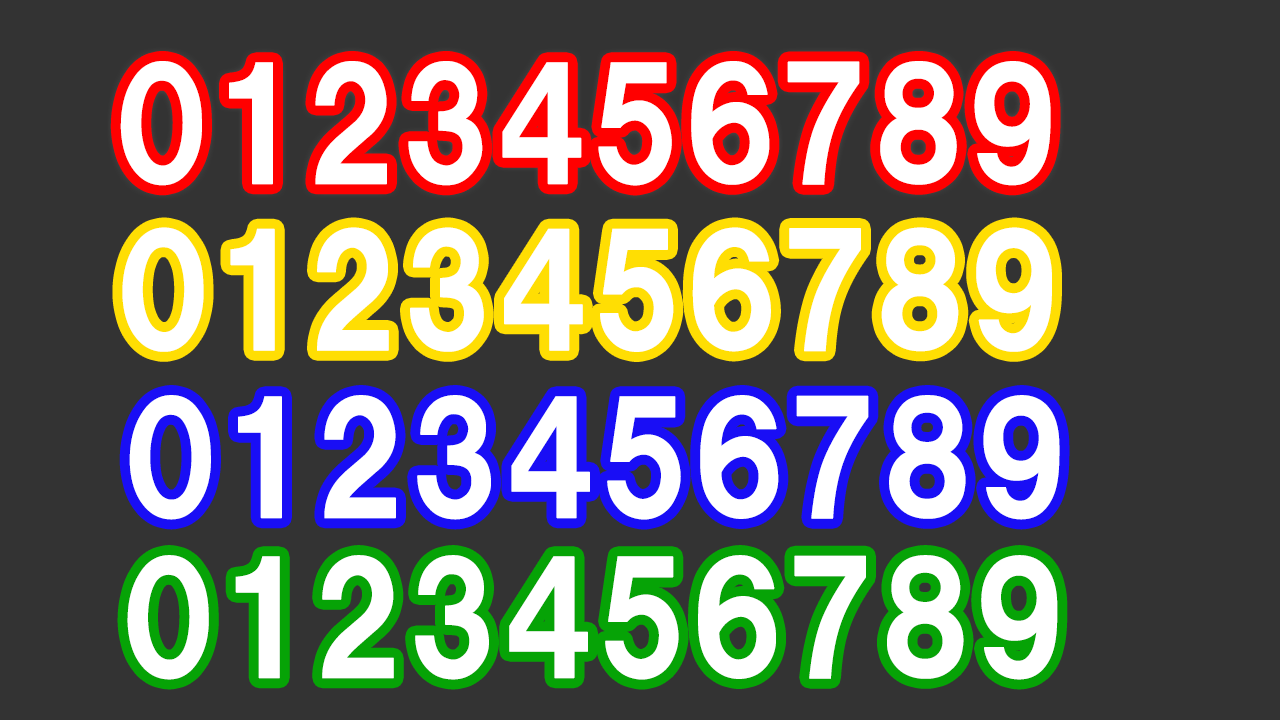
<style>
.page{position:relative;width:1280px;height:720px;background:#333333}
.page>*{position:absolute;margin:0}
.t1{font:150px "HGSSoeiKakugothicUB";letter-spacing:-0.025em;color:#ffffff;font-weight:bold}
</style>
<div class="page">
<p class="t1" style="left:120px;top:61px;width:931px;height:125px">0123456789</p>
<p class="t1" style="left:122px;top:227px;width:930px;height:125px">0123456789</p>
<p class="t1" style="left:129px;top:395px;width:931px;height:125px">0123456789</p>
<p class="t1" style="left:127px;top:555px;width:931px;height:125px">0123456789</p>
</div>
